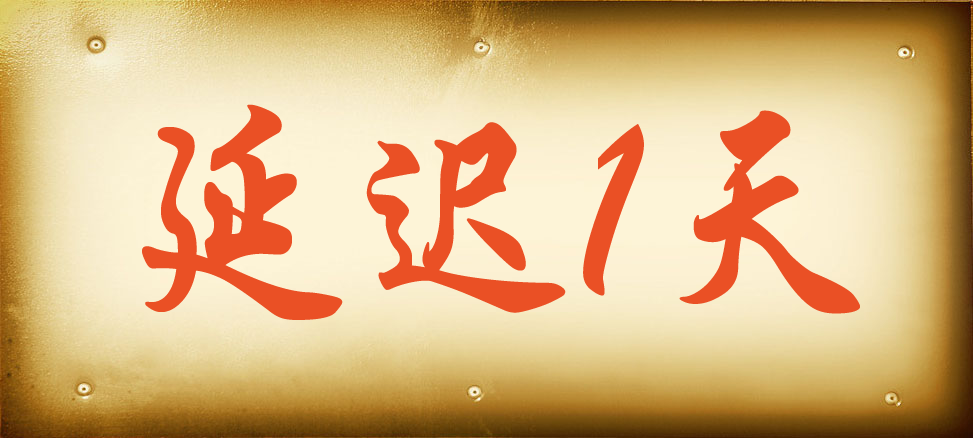
<style>
.page{position:relative;width:973px;height:438px}
.page>*{position:absolute;margin:0}
.t1{font:271.3px "STXingkai";color:#ea5025;scale:0.83 1}
</style>
<div class="page">
<p class="t1" style="left:142px;top:104px;width:718px;height:216px">延迟1天</p>
</div>
